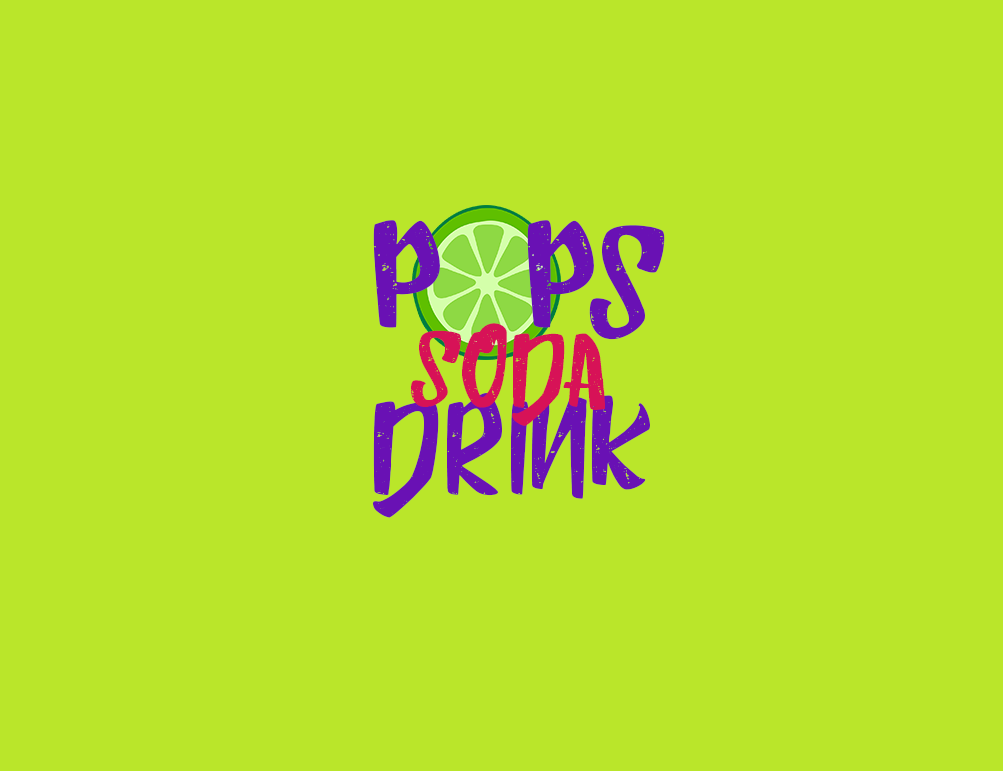
<style>
.page{position:relative;width:1003px;height:771px;background:#bae62a}
.page>*{position:absolute;margin:0}
.t1{font:150px "HumblleRoughtAllCaps";color:#6911b4}
.t2{font:100px "HumblleRoughtAllCaps";color:#d71257}
.t3{font:125px "HumblleRoughtAllCaps";color:#6911b4}
</style>
<div class="page">
<p class="t1" style="left:373px;top:220px;width:292px;height:120px">p   PS</p>
<p class="t2" style="left:411px;top:323px;width:194px;height:103px">SODA</p>
<p class="t3" style="left:372px;top:393px;width:278px;height:125px">DRINK</p>
</div>
